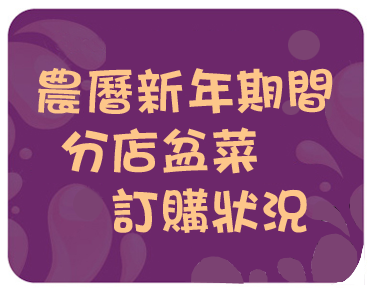
<style>
.page{position:relative;width:370px;height:288px;background:#6c276a}
.page>*{position:absolute;margin:0}
.t1{font:50px "DFHaiBao-W9-WIN-BF";color:#fdc689}
</style>
<div class="page">
<p class="t1" style="left:38px;top:68px;width:295px;height:165px;text-align:center">農曆新年期間<br>分店盆菜　<br>　訂購狀況</p>
</div>
